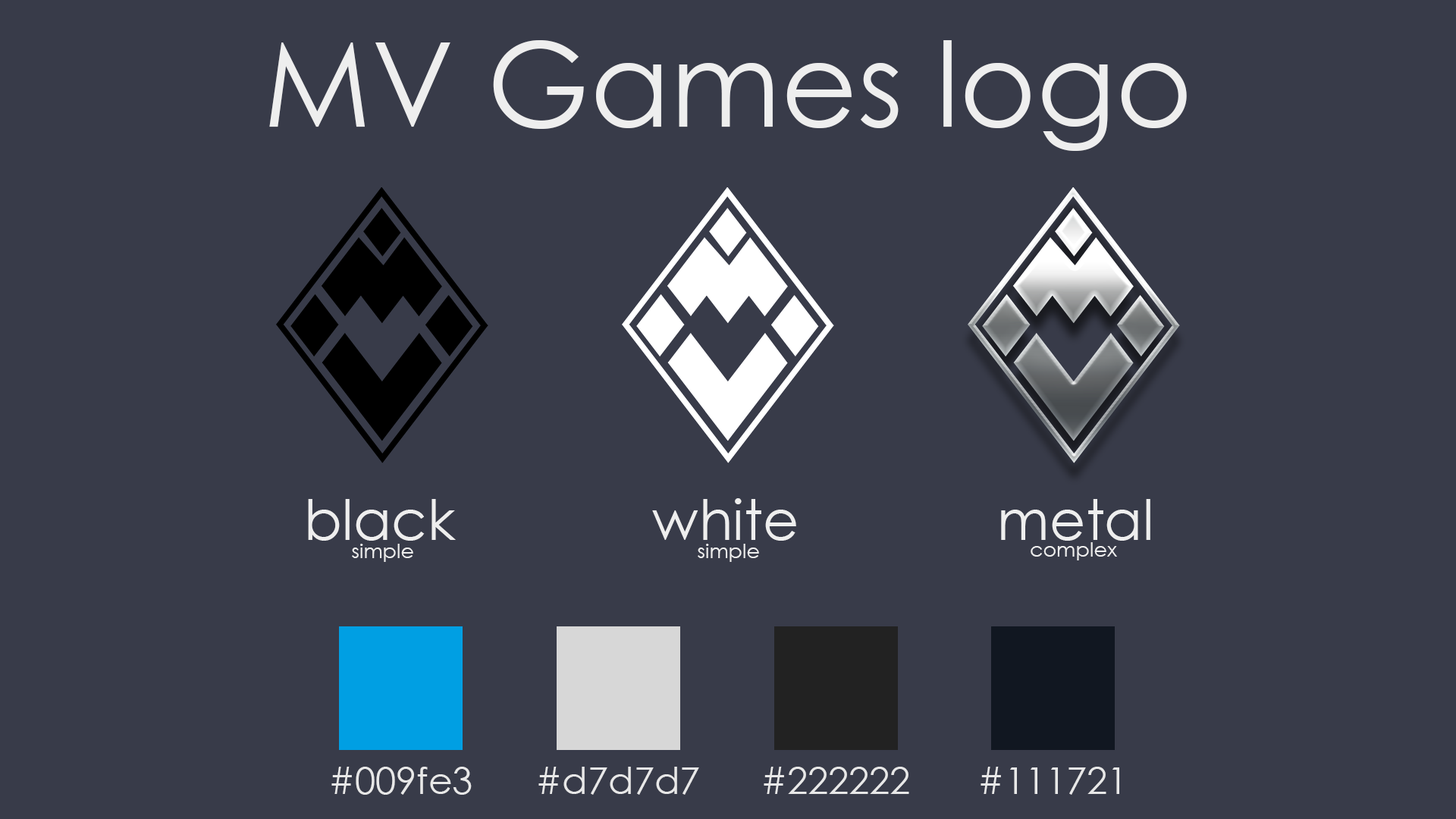
<style>
.page{position:relative;width:1456px;height:819px;background:#383b49}
.page>*{position:absolute;margin:0}
.t1{font:117.9px "CenturyGothic";color:#eeeeee}
.t2{font:55.7px "CenturyGothic";color:#eeeeee}
.t3{font:20.5px "CenturyGothic";color:#eeeeee}
.t4{font:37.2px "CenturyGothic";color:#e8e8e8}
</style>
<div class="page">
<p class="t1" style="left:269px;top:40px;width:918px;height:111px">MV Games logo</p>
<p class="t2" style="left:308px;top:499px;width:148px;height:42px">black</p>
<p class="t2" style="left:652px;top:498px;width:144px;height:43px">white</p>
<p class="t2" style="left:1001px;top:499px;width:149px;height:42px">metal</p>
<p class="t3" style="left:352px;top:544px;width:61px;height:18px">simple</p>
<p class="t3" style="left:698px;top:544px;width:61px;height:18px">simple</p>
<p class="t3" style="left:1031px;top:542px;width:86px;height:18px">complex</p>
<p class="t4" style="left:331px;top:767px;width:141px;height:28px">#009fe3</p>
<p class="t4" style="left:538px;top:767px;width:161px;height:28px">#d7d7d7</p>
<p class="t4" style="left:764px;top:767px;width:145px;height:27px">#222222</p>
<p class="t4" style="left:981px;top:767px;width:138px;height:28px">#111721</p>
</div>
